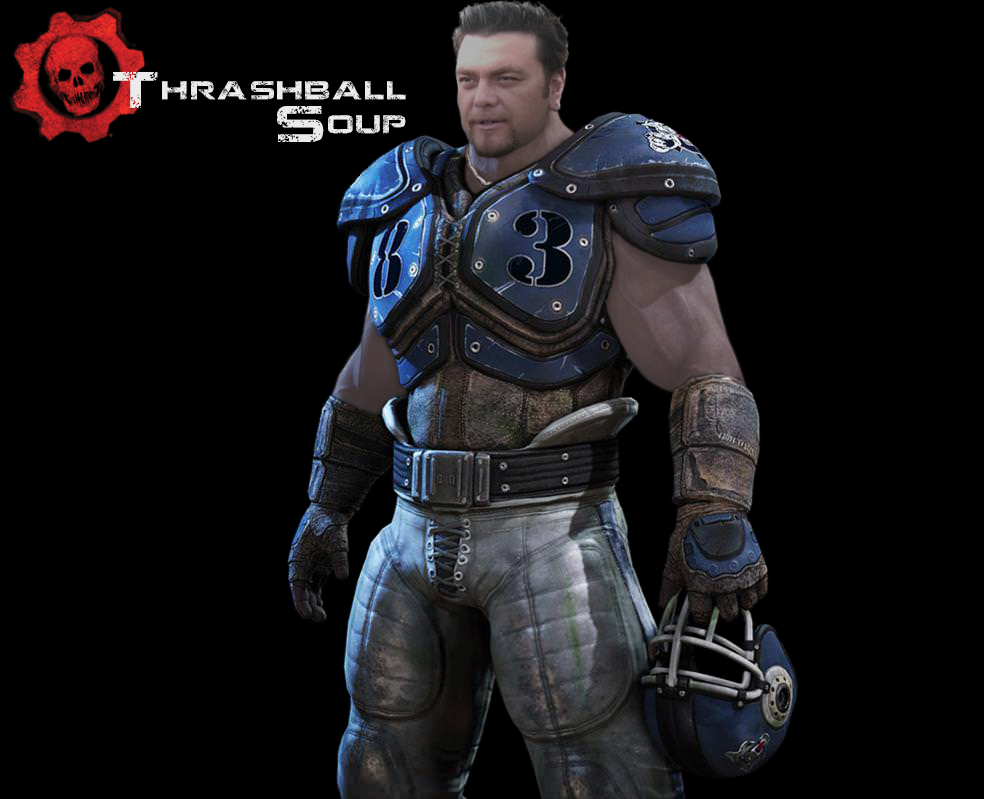
<style>
.page{position:relative;width:984px;height:799px;background:#000000}
.page>*{position:absolute;margin:0}
.t1{font:51.5px/34.4px "JacintoSans";letter-spacing:0.038em;color:#ebebeb;scale:1.06 1}
</style>
<div class="page">
<p class="t1" style="left:113px;top:72px;width:293px;height:70px;text-align:right">Thrashball<br>Soup</p>
</div>
